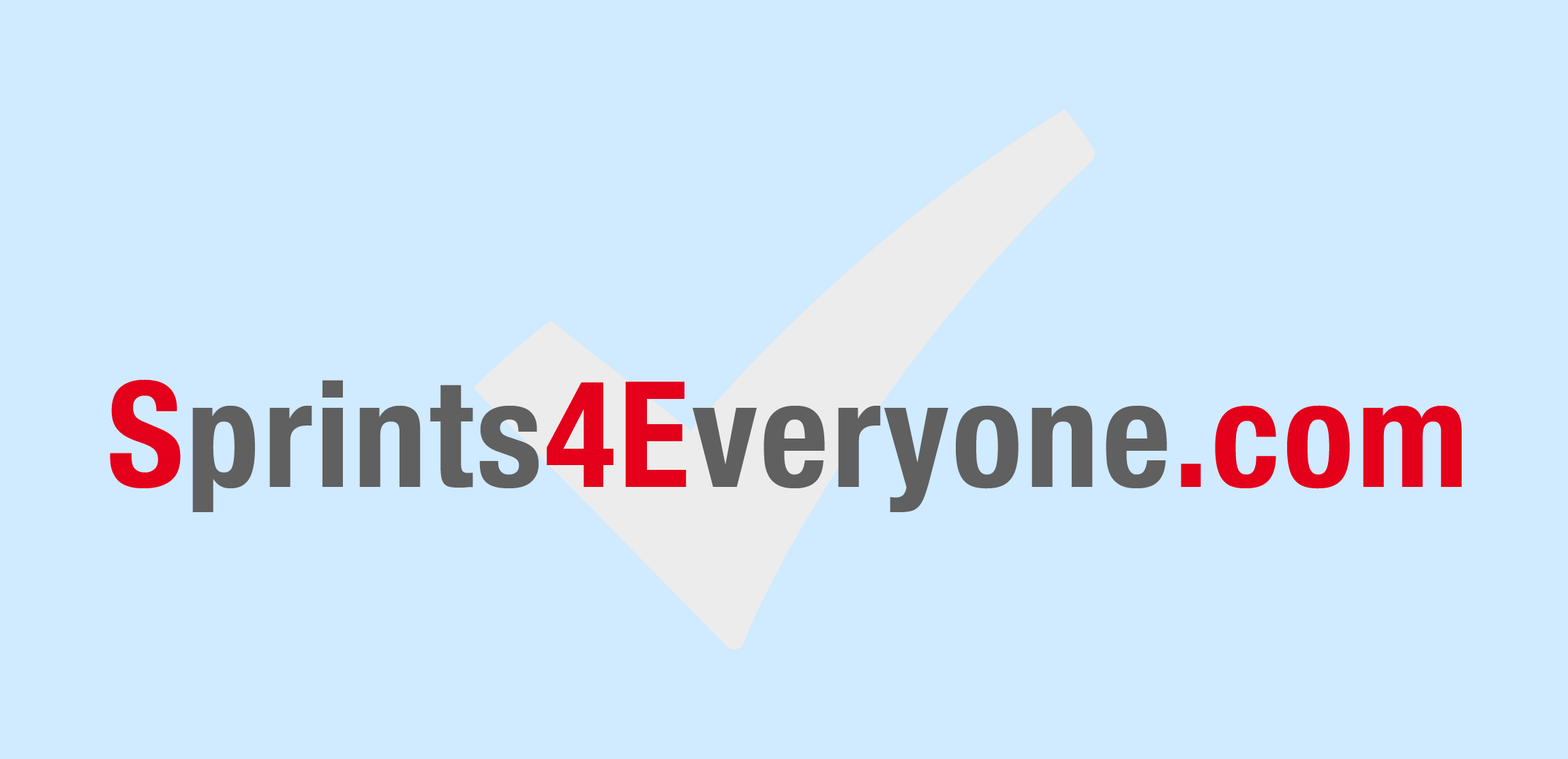
<style>
.page{position:relative;width:1568px;height:759px;background:#d0eaff}
.page>*{position:absolute;margin:0}
.t1{font:147.3px "HelveticaNeue-CondensedBold";letter-spacing:0.02em;color:#606060}
.t2{font:147.3px "HelveticaNeue-CondensedBold";letter-spacing:0.02em;color:#e4001b}
</style>
<div class="page">
<p class="t1" style="left:110px;top:379px;width:1352px;height:133px"><span class="t2">S</span>prints<span class="t2">4E</span>veryone<span class="t2">.com</span></p>
</div>
